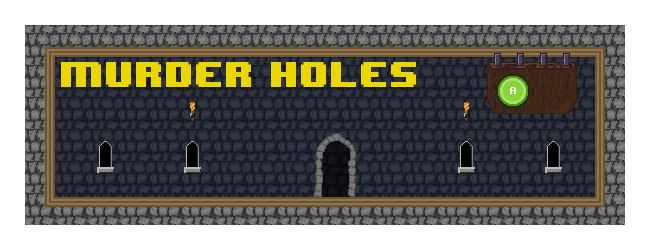
<style>
.page{position:relative;width:650px;height:250px;background:#ffffff}
.page>*{position:absolute;margin:0}
.t1{font:30px "8BITWONDERNominal";color:#ead700}
</style>
<div class="page">
<p class="t1" style="left:61px;top:62px;width:355px;height:25px">Murder holes</p>
</div>
